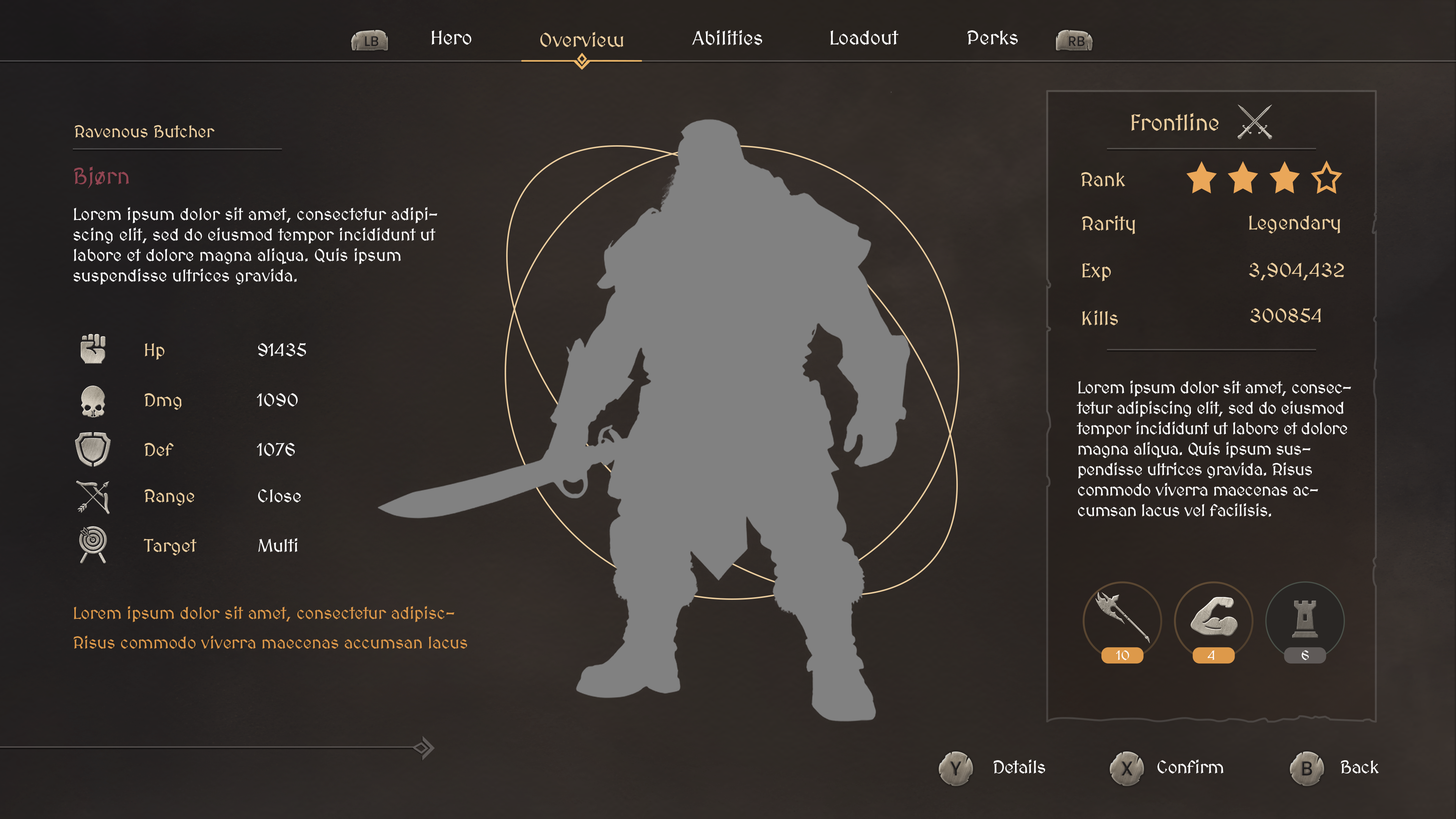
<style>
.page{position:relative;width:1456px;height:819px}
.page>*{position:absolute;margin:0}
.t1{font:19.8px "MedievalSharp";color:#ffffff}
.t2{font:19.8px "MedievalSharp";color:#ecce9f}
.t3{font:22.7px "MedievalSharp";color:#ecce9f}
.t4{font:17.1px "MedievalSharp";color:#ecce9f}
.t5{font:22.7px "MedievalSharp";color:#924552}
.t6{font:19.7px "MedievalSharp";color:#ecce9f}
.t7{font:17.1px "MedievalSharp";color:#ffffff}
.t8{font:18.2px "MedievalSharp";color:#ecce9f}
.t9{font:18.2px "MedievalSharp";color:#ffffff}
.t10{font:17.1px "MedievalSharp";letter-spacing:-0.02em;color:#ffffff}
.t11{font:17.1px "MedievalSharp";color:#dd994a}
.t12{font:13.6px "MedievalSharp";color:#ffffff}
.t13{font:18.2px "MedievalSharp";letter-spacing:-0.02em;color:#ffffff}
</style>
<div class="page">
<p class="t1" style="left:692px;top:30px;width:70px;height:15px">Abilities</p>
<p class="t1" style="left:431px;top:30px;width:40px;height:15px">Hero</p>
<p class="t2" style="left:540px;top:32px;width:83px;height:15px">Overview</p>
<p class="t1" style="left:830px;top:30px;width:69px;height:15px">Loadout</p>
<p class="t1" style="left:967px;top:30px;width:51px;height:15px">Perks</p>
<p class="t3" style="left:1131px;top:113px;width:88px;height:18px">Frontline</p>
<p class="t4" style="left:75px;top:125px;width:140px;height:13px">Ravenous Butcher</p>
<p class="t5" style="left:74px;top:166px;width:55px;height:22px">Bjørn</p>
<p class="t6" style="left:1081px;top:172px;width:44px;height:15px">Rank</p>
<p class="t7" style="left:74px;top:207px;width:364px;height:78px">Lorem ipsum dolor sit amet, consectetur adipiscing elit, sed do eiusmod tempor incididunt ut labore et dolore magna aliqua. Quis ipsum suspendisse ultrices gravida.</p>
<p class="t6" style="left:1082px;top:215px;width:53px;height:19px">Rarity</p>
<p class="t6" style="left:1249px;top:215px;width:91px;height:19px">Legendary</p>
<p class="t6" style="left:1082px;top:263px;width:29px;height:18px">Exp</p>
<p class="t6" style="left:1249px;top:263px;width:95px;height:18px">3,904,432</p>
<p class="t6" style="left:1082px;top:310px;width:36px;height:15px">Kills</p>
<p class="t6" style="left:1250px;top:308px;width:71px;height:15px">300854</p>
<p class="t8" style="left:145px;top:343px;width:20px;height:17px">Hp</p>
<p class="t9" style="left:258px;top:343px;width:48px;height:13px">91435</p>
<p class="t10" style="left:1076px;top:380px;width:275px;height:137px">Lorem ipsum dolor sit amet, consectetur adipiscing elit, sed do eiusmod tempor incididunt ut labore et dolore magna aliqua. Quis ipsum suspendisse ultrices gravida. Risus commodo viverra maecenas accumsan lacus vel facilisis.</p>
<p class="t8" style="left:144px;top:393px;width:38px;height:17px">Dmg</p>
<p class="t9" style="left:256px;top:393px;width:42px;height:13px">1090</p>
<p class="t8" style="left:144px;top:443px;width:30px;height:13px">Def</p>
<p class="t9" style="left:256px;top:443px;width:39px;height:13px">1076</p>
<p class="t8" style="left:144px;top:489px;width:51px;height:17px">Range</p>
<p class="t9" style="left:258px;top:489px;width:43px;height:13px">Close</p>
<p class="t8" style="left:143px;top:539px;width:54px;height:16px">Target</p>
<p class="t9" style="left:258px;top:538px;width:39px;height:14px">Multi</p>
<p class="t11" style="left:74px;top:606px;width:381px;height:16px">Lorem ipsum dolor sit amet, consectetur adipiscing elit.</p>
<p class="t11" style="left:74px;top:635px;width:393px;height:14px">Risus commodo viverra maecenas accumsan lacus vel facilisis.</p>
<p class="t12" style="left:1116px;top:650px;width:13px;height:10px">10</p>
<p class="t12" style="left:1208px;top:650px;width:6px;height:10px">4</p>
<p class="t12" style="left:1302px;top:650px;width:7px;height:10px">6</p>
<p class="t13" style="left:993px;top:759px;width:52px;height:14px">Details</p>
<p class="t13" style="left:1157px;top:759px;width:67px;height:14px">Confirm</p>
<p class="t13" style="left:1341px;top:760px;width:38px;height:13px">Back</p>
</div>
